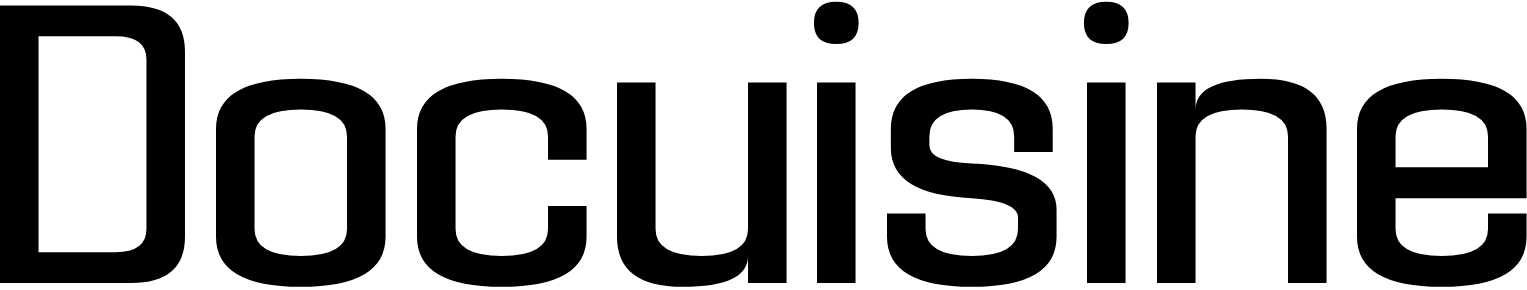
<style>
.page{position:relative;width:1527px;height:290px;background:#ffffff}
.page>*{position:absolute;margin:0}
.t1{font:370px "Enigmatic";color:#000000}
</style>
<div class="page">
<p class="t1" style="left:0px;top:1px;width:1527px;height:286px">Docuisine</p>
</div>
